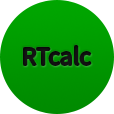
<style>
.page{position:relative;width:114px;height:114px;background:#ffffff}
.page>*{position:absolute;margin:0}
.t1{font:26px "SourceSansPro-Regular";color:#111111}
</style>
<div class="page">
<p class="t1" style="left:24px;top:46px;width:67px;height:19px">RTcalc</p>
</div>
